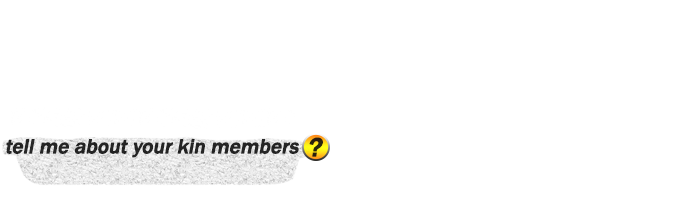
<style>
.page{position:relative;width:700px;height:200px;background:#ffffff}
.page>*{position:absolute;margin:0}
.t1{font:27px "FranklinGothic-Medium";color:#28220e;font-weight:bold;font-style:italic}
.t2{font:21px "FranklinGothic-Medium";letter-spacing:-0.02em;color:#252525;font-weight:bold;font-style:italic}
</style>
<div class="page">
<p class="t1" style="left:309px;top:137px;width:14px;height:20px">?</p>
<p class="t2" style="left:6px;top:139px;width:293px;height:19px">tell me about your kin members</p>
</div>
